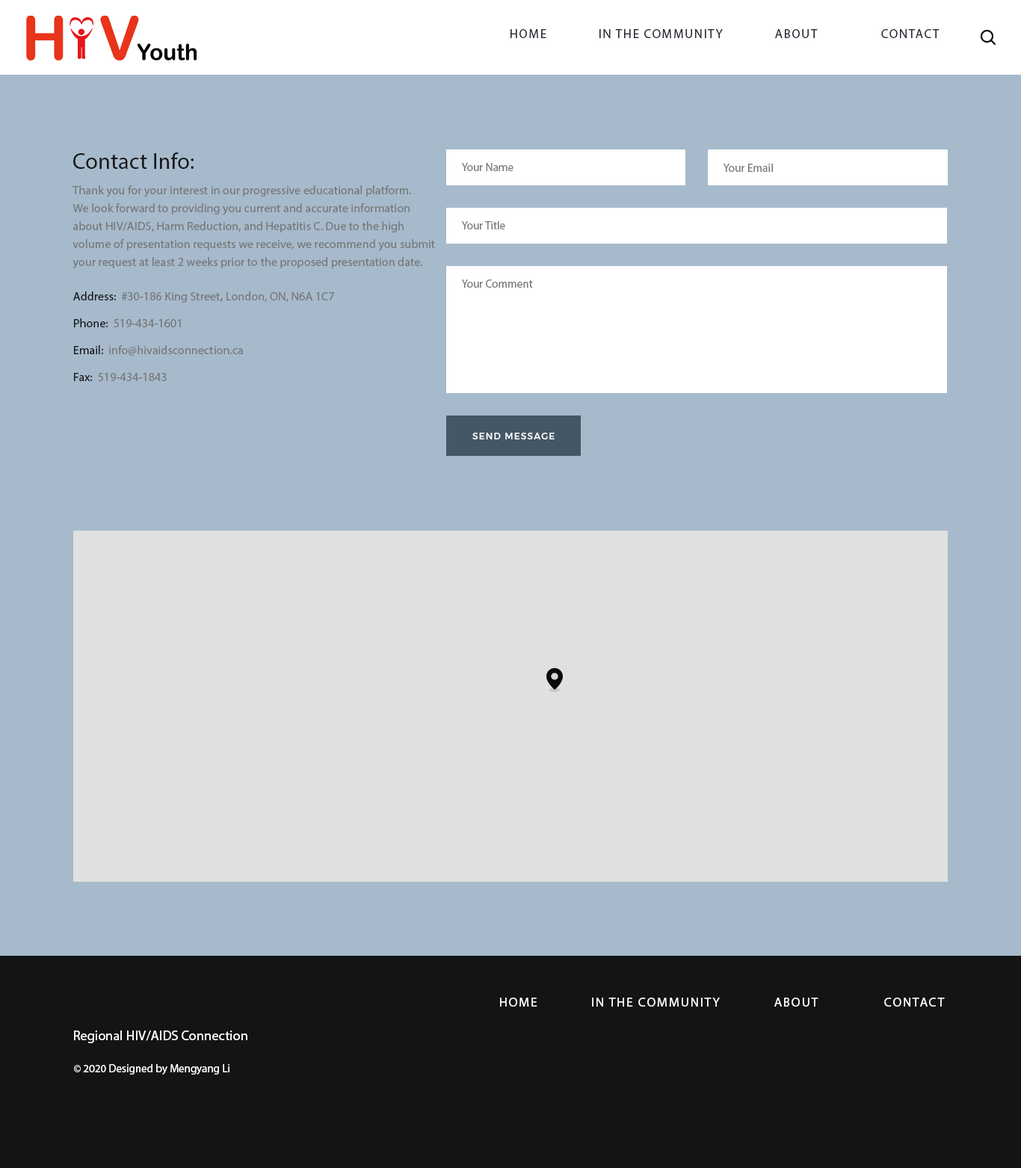
<style>
.page{position:relative;width:1021px;height:1168px;background:#a6bacc}
.page>*{position:absolute;margin:0}
.t1{font:12.5px "MyriadPro-Regular";letter-spacing:0.1em;color:#252a33;text-transform:uppercase}
.t2{font:22.4px "MyriadPro-Regular";letter-spacing:0.01em;color:#171717}
.t3{font:11.2px "MyriadPro-Regular";letter-spacing:0.005em;color:#787878}
.t4{font:11.2px "MyriadPro-Regular";letter-spacing:0.01em;color:#787878}
.t5{font:12px/17.9px "MyriadPro-Regular";letter-spacing:0.005em;color:#787878}
.t6{font:12px/26.9px "MyriadPro-Regular";letter-spacing:0.005em;color:#787878}
.t7{font:12px/26.9px "MyriadPro-Regular";letter-spacing:0.005em;color:#171717}
.t8{font:12px/26.9px "AdobeHeitiStd-Regular";letter-spacing:0.005em;color:#787878}
.t9{font:9px "Montserrat-Medium";letter-spacing:0.1em;color:#ffffff;text-transform:uppercase}
.t10{font:13px "MyriadPro-Regular";letter-spacing:0.1em;color:#fefefe;text-transform:uppercase}
.t11{font:13.5px "MyriadPro-Regular";letter-spacing:0.01em;color:#ffffff}
.t12{font:11.2px "MyriadPro-Regular";color:#ffffff}
</style>
<div class="page">
<p class="t1" style="left:510px;top:29px;width:429px;height:9px">Home             IN THE COMMUNITY             About                Contact</p>
<p class="t2" style="left:73px;top:152px;width:121px;height:17px">Contact Info:</p>
<p class="t3" style="left:462px;top:163px;width:51px;height:8px">Your Name</p>
<p class="t4" style="left:723px;top:164px;width:50px;height:8px">Your Email</p>
<p class="t5" style="left:72px;top:185px;width:363px;height:84px">Thank you for your interest in our progressive educational platform. <br>We look forward to providing you current and accurate information <br>about HIV/AIDS, Harm Reduction, and Hepatitis C. Due to the high <br>volume of presentation requests we receive, we recommend you submit <br>your request at least 2 weeks prior to the proposed presentation date.</p>
<p class="t3" style="left:462px;top:221px;width:43px;height:8px">Your Title</p>
<p class="t3" style="left:462px;top:280px;width:71px;height:8px">Your Comment</p>
<p class="t6" style="left:73px;top:291px;width:261px;height:90px"><span class="t7">Address:  </span>#30-186 King Street<span class="t8">,</span> London, ON, N6A 1C7<br><span class="t7">Phone:  </span>519-434-1601 <br><span class="t7">Email:  </span>info@hivaidsconnection.ca<br><span class="t7">Fax:  </span>519-434-1843</p>
<p class="t9" style="left:472px;top:433px;width:83px;height:6px">send message</p>
<p class="t10" style="left:500px;top:998px;width:445px;height:9px">Home             IN THE COMMUNITY             About                Contact</p>
<p class="t11" style="left:74px;top:1031px;width:173px;height:12px">Regional HIV/AIDS Connection</p>
<p class="t12" style="left:74px;top:1064px;width:155px;height:11px">© 2020 Designed by Mengyang Li</p>
</div>
